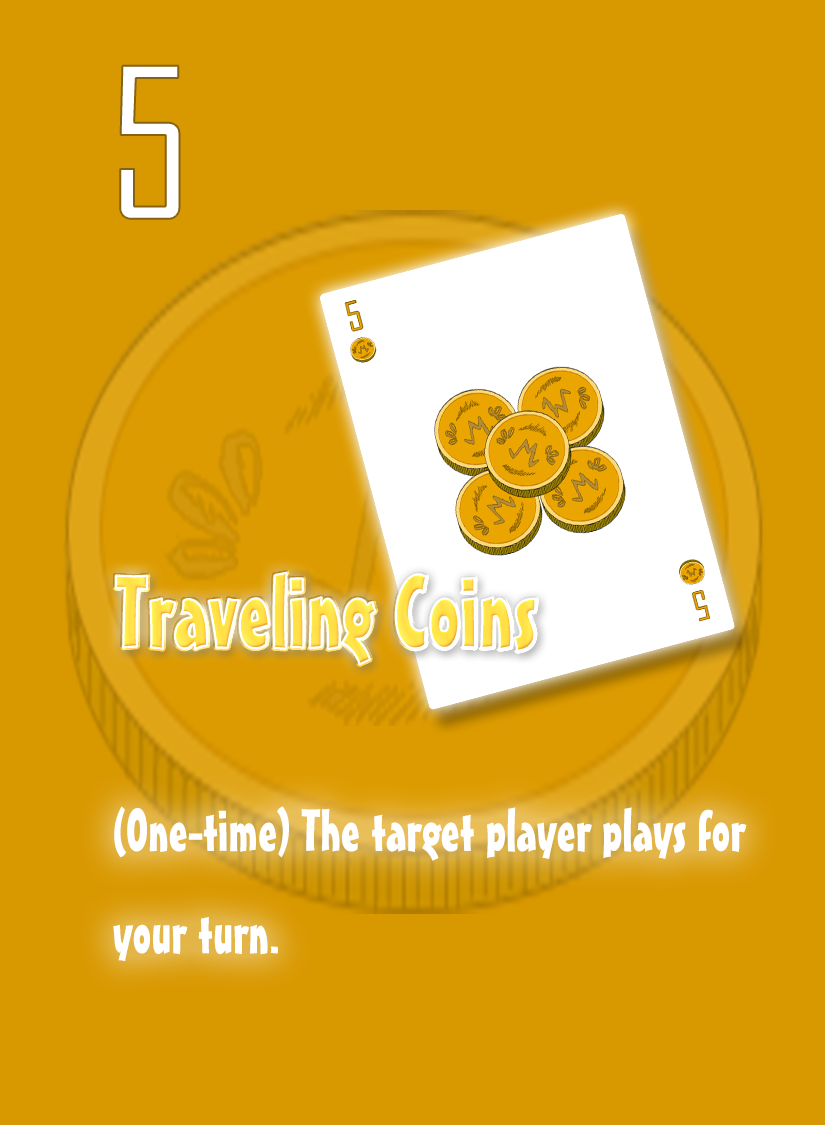
<style>
.page{position:relative;width:825px;height:1125px;background:#d89800}
.page>*{position:absolute;margin:0}
.t1{font:200px "AgencyFB-Reg";color:#ffffff}
.t2{font:100px "MisterEarlBT-Regular";color:#ffe34a}
.t3{font:58.3px "MisterEarlBT-Regular";color:#ffffff}
</style>
<div class="page">
<p class="t1" style="left:120px;top:65px;width:60px;height:154px">5</p>
<p class="t2" style="left:115px;top:572px;width:421px;height:92px">Traveling Coins</p>
<p class="t3" style="left:113px;top:806px;width:634px;height:156px">(One-time) The target player plays for <br>your turn.</p>
</div>
